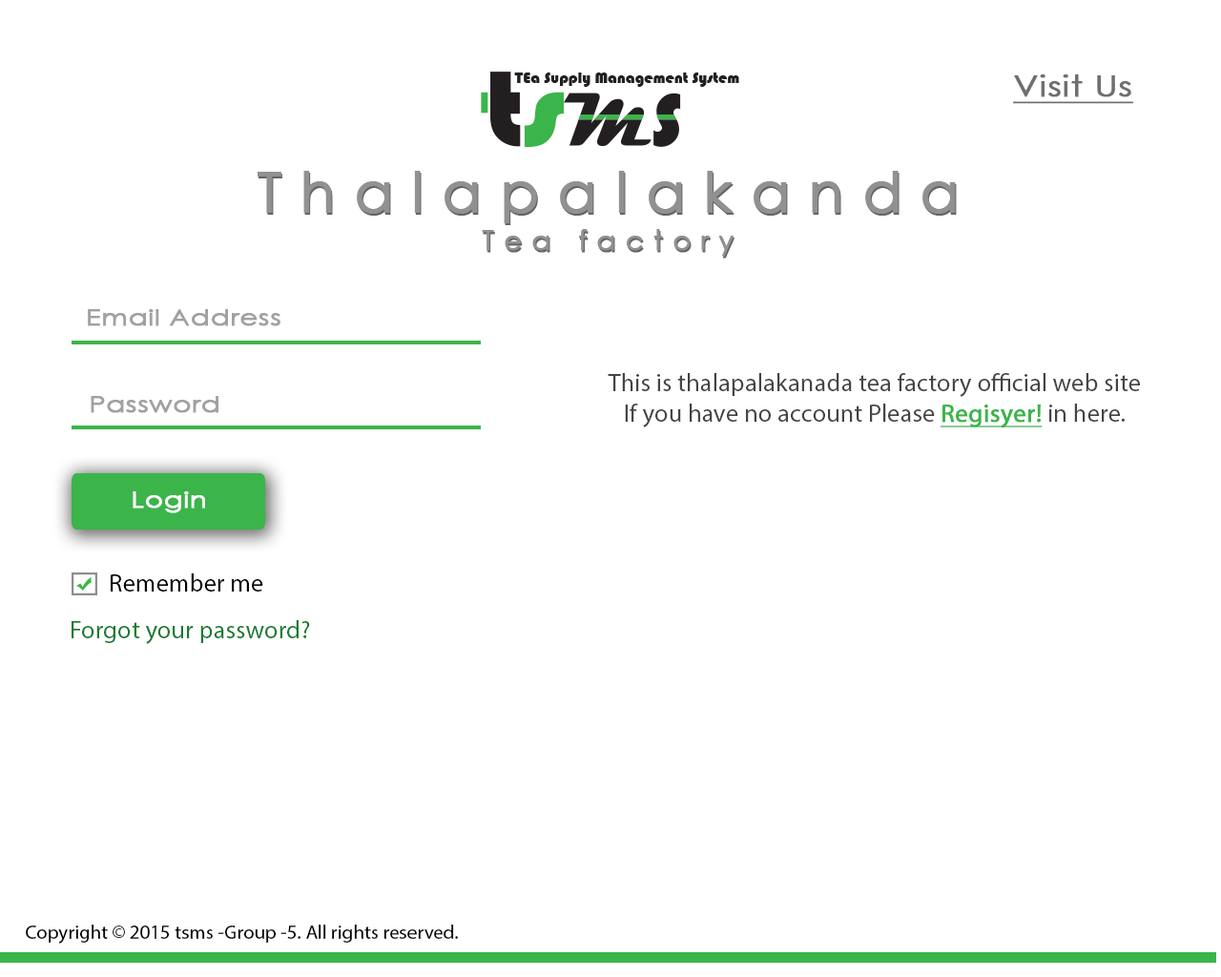
<style>
.page{position:relative;width:1221px;height:977px;background:#ffffff}
.page>*{position:absolute;margin:0}
.t1{font:29px "CenturyGothic";color:#6f6f6f;font-weight:bold;text-decoration:underline;scale:1.23 1}
.t2{font:56px "CenturyGothic";letter-spacing:0.32em;color:#919191;font-weight:bold}
.t3{font:28px "CenturyGothic";letter-spacing:0.32em;color:#919191;font-weight:bold}
.t4{font:22.8px "CenturyGothic";color:#a1a1a1;font-weight:bold;scale:1.22 1}
.t5{font:25.4px "MyriadPro-Regular";color:#444444}
.t6{font:25.4px "MyriadPro-Regular";color:#3bb54a;font-weight:bold;text-decoration:underline}
.t7{font:22.8px "CenturyGothic";color:#ffffff;font-weight:bold;scale:1.22 1}
.t8{font:25.4px "MyriadPro-Regular";color:#000000}
.t9{font:25.4px "MyriadPro-Regular";color:#197b30}
.t10{font:19.9px "MyriadPro-Regular";color:#000000}
</style>
<div class="page">
<p class="t1" style="left:1013px;top:74px;width:120px;height:30px">Visit Us</p>
<p class="t2" style="left:258px;top:171px;width:698px;height:86px;text-align:center">Thalapalakanda<br><span class="t3">Tea factory</span></p>
<p class="t4" style="left:88px;top:309px;width:192px;height:17px">Email Address</p>
<p class="t5" style="left:608px;top:373px;width:532px;height:55px;text-align:center">This is thalapalakanada tea factory official web site<br>If you have no account Please <span class="t6">Regisyer!</span> in here.</p>
<p class="t4" style="left:91px;top:396px;width:127px;height:17px">Password</p>
<p class="t7" style="left:133px;top:491px;width:72px;height:22px">Login</p>
<p class="t8" style="left:111px;top:573px;width:152px;height:18px">Remember me</p>
<p class="t9" style="left:72px;top:620px;width:238px;height:24px">Forgot your password?</p>
<p class="t10" style="left:26px;top:924px;width:432px;height:19px">Copyright © 2015 tsms -Group -5. All rights reserved.</p>
</div>
